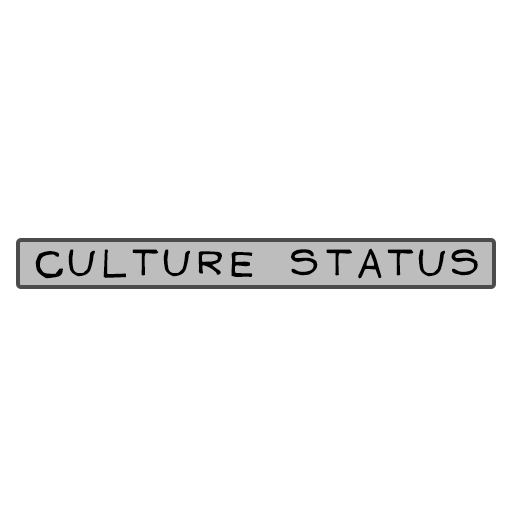
<style>
.page{position:relative;width:512px;height:512px;background:#ffffff}
.page>*{position:absolute;margin:0}
.t1{font:272.8px "MenInBlackCredits-Regular";color:#000000;scale:1.07 1}
</style>
<div class="page">
<p class="t1" style="left:35px;top:248px;width:443px;height:31px">culture status</p>
</div>
